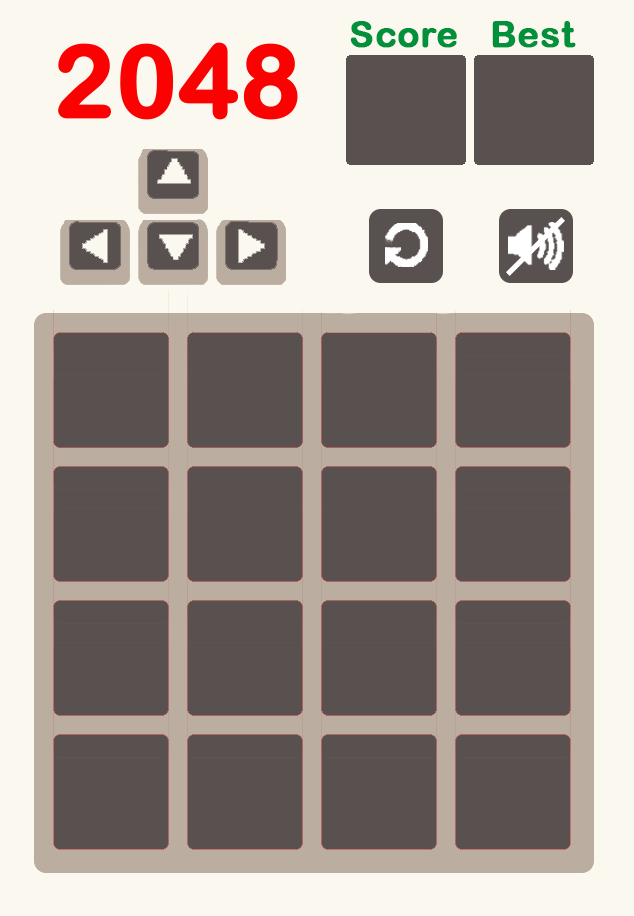
<style>
.page{position:relative;width:634px;height:916px;background:#595050}
.page>*{position:absolute;margin:0}
.t1{font:36.3px "ArialRoundedMTBold";color:#00913a;font-weight:bold}
</style>
<div class="page">
<p class="t1" style="left:350px;top:21px;width:107px;height:27px">Score</p>
<p class="t1" style="left:492px;top:21px;width:84px;height:27px">Best</p>
</div>
